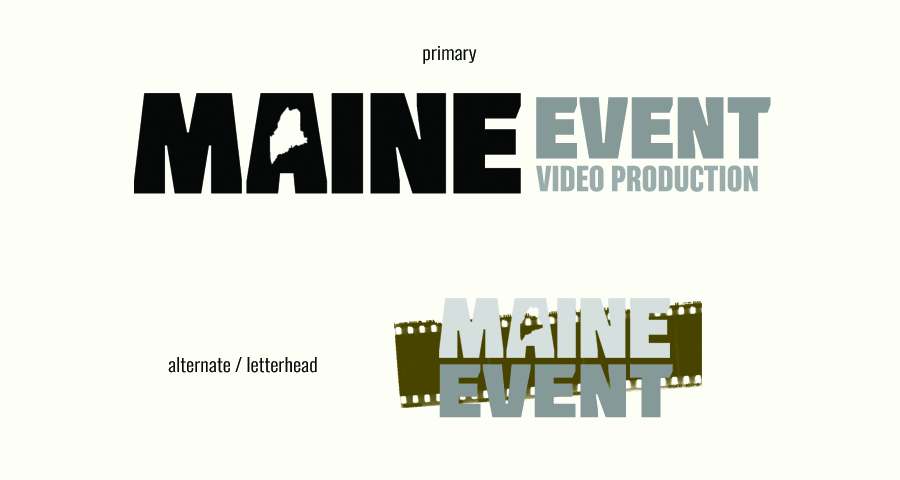
<style>
.page{position:relative;width:900px;height:480px;background:#fdfff6}
.page>*{position:absolute;margin:0}
.t1{font:18.5px "Oswald-Light";color:#080a0a;scale:1.11 1}
.t2{font:86.9px "Molot";color:#849998}
.t3{font:33.1px "Balboa-Bold";color:#9aacab;text-transform:uppercase}
.t4{font:75.5px "Molot";color:#849998;scale:1.15 1}
</style>
<div class="page">
<p class="t1" style="left:423px;top:46px;width:54px;height:18px">primary</p>
<p class="t2" style="left:536px;top:97px;width:235px;height:62px">event</p>
<p class="t3" style="left:536px;top:165px;width:222px;height:27px">video production</p>
<p class="t1" style="left:168px;top:357px;width:149px;height:16px">alternate / letterhead</p>
<p class="t4" style="left:439px;top:364px;width:234px;height:54px">event</p>
</div>
